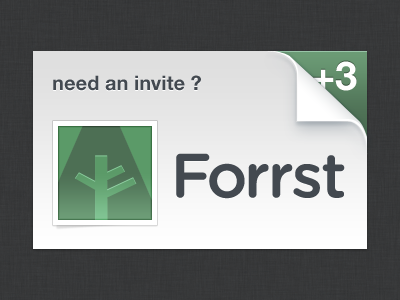
<style>
.page{position:relative;width:400px;height:300px}
.page>*{position:absolute;margin:0}
.t1{font:40px "HelveticaNeueLTPro-Bd";color:#ffffff}
.t2{font:20px "HelveticaNeueLTPro-Bd";color:#434950}
</style>
<div class="page">
<p class="t1" style="left:313px;top:61px;width:44px;height:30px">+3</p>
<p class="t2" style="left:53px;top:75px;width:148px;height:16px">need an invite ?</p>
</div>
